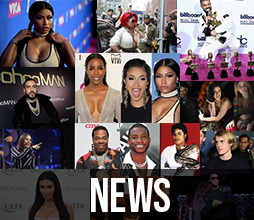
<style>
.page{position:relative;width:254px;height:220px}
.page>*{position:absolute;margin:0}
.t1{font:47.8px "BebasNeue-Regular";color:#ffffff}
</style>
<div class="page">
<p class="t1" style="left:91px;top:178px;width:79px;height:34px">NEWS</p>
</div>
